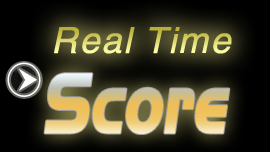
<style>
.page{position:relative;width:270px;height:152px}
.page>*{position:absolute;margin:0}
.t1{font:36px "UTMHelve-Italic";font-weight:bold}
.t2{font:81.6px "UTM-Hanzel";font-weight:bold;font-style:italic;scale:0.76 1}
</style>
<div class="page">
<p class="t1" style="left:54px;top:27px;width:178px;height:27px">Real Time</p>
<p class="t2" style="left:44px;top:73px;width:186px;height:61px">Score</p>
</div>
